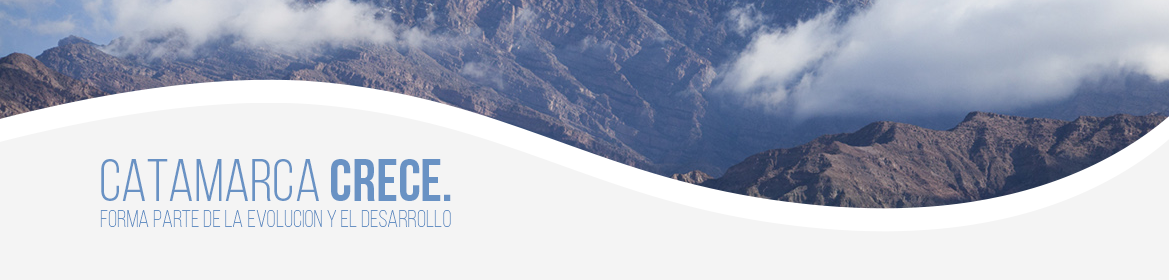
<style>
.page{position:relative;width:1169px;height:280px;background:#f4f4f4}
.page>*{position:absolute;margin:0}
.t1{font:59px "BebasNeue-Book";color:#6992c4}
.t2{font:59px "BebasNeue-Bold";color:#6992c4}
.t3{font:24.4px "BebasNeue-Light";color:#6992c4}
</style>
<div class="page">
<p class="t1" style="left:101px;top:159px;width:350px;height:42px">CATAMARCA <span class="t2">CRECE.</span></p>
<p class="t3" style="left:100px;top:210px;width:351px;height:18px">forma parte de la evolucion y el desarrollo</p>
</div>
